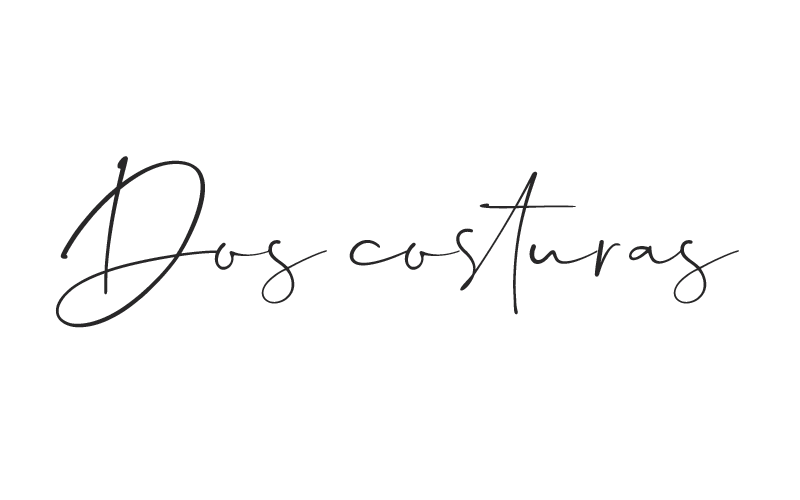
<style>
.page{position:relative;width:800px;height:500px;background:#ffffff}
.page>*{position:absolute;margin:0}
.t1{font:60px/240px "Dalmatins";letter-spacing:0.01em;color:#282728}
</style>
<div class="page">
<p class="t1" style="left:55px;top:156px;width:684px;height:172px;text-align:center">Dos costuras</p>
</div>
